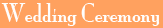
<style>
.page{position:relative;width:163px;height:28px;background:#ffa15f}
.page>*{position:absolute;margin:0}
.t1{font:24px "MonaLisaSolidITCTT";color:#fefefe}
</style>
<div class="page">
<p class="t1" style="left:1px;top:3px;width:159px;height:23px">Wedding Ceremony</p>
</div>
